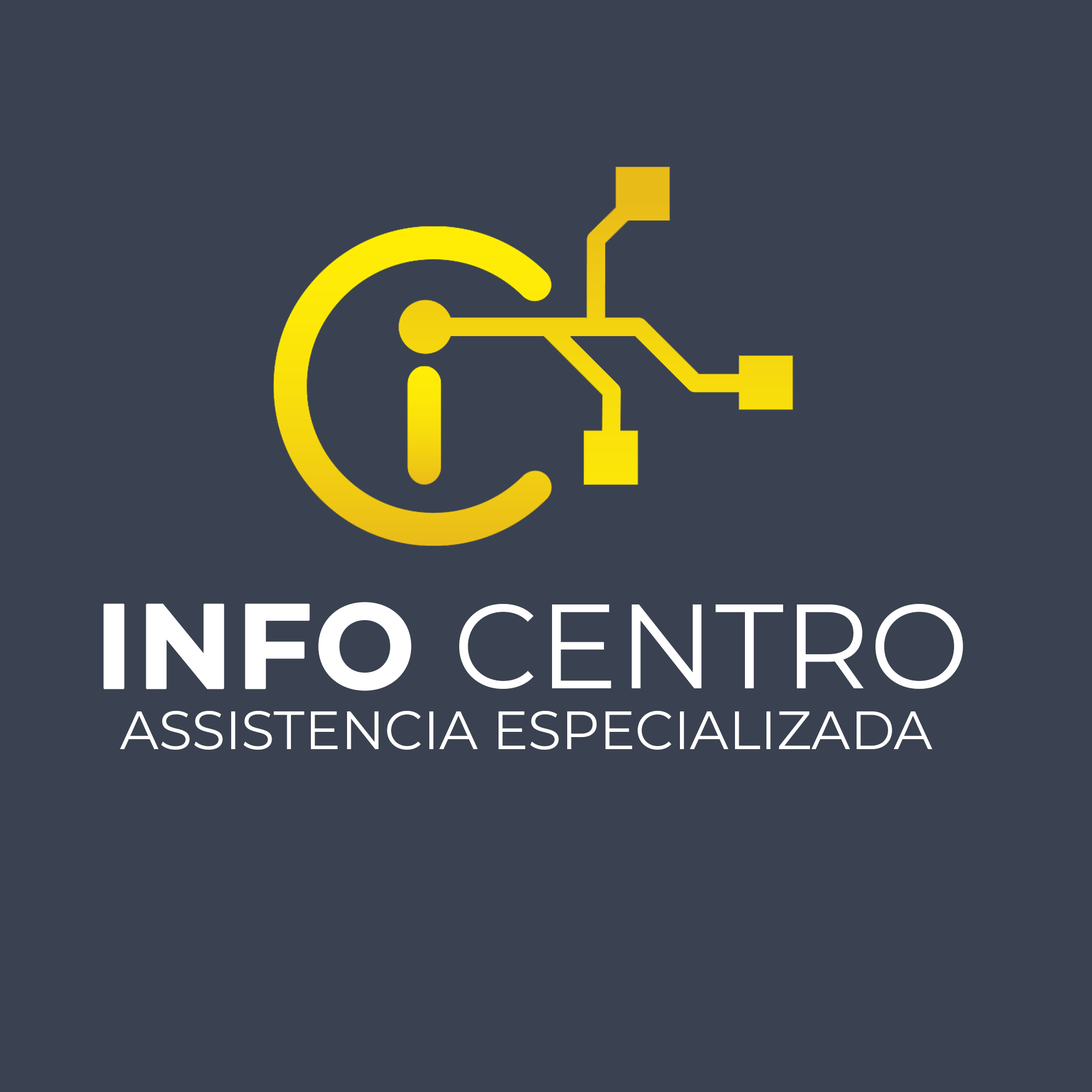
<style>
.page{position:relative;width:1092px;height:1092px;background:#3a4150}
.page>*{position:absolute;margin:0}
.t1{font:119.6px "Montserrat-Regular";color:#ffffff}
.t2{font:119.6px "Montserrat-Bold";color:#ffffff;font-weight:bold}
.t3{font:53.8px "Montserrat-Regular";color:#ffffff}
</style>
<div class="page">
<p class="t1" style="left:103px;top:602px;width:860px;height:89px"><span class="t2">INFO </span>CENTRO</p>
<p class="t3" style="left:120px;top:711px;width:813px;height:39px">ASSISTENCIA ESPECIALIZADA</p>
</div>
